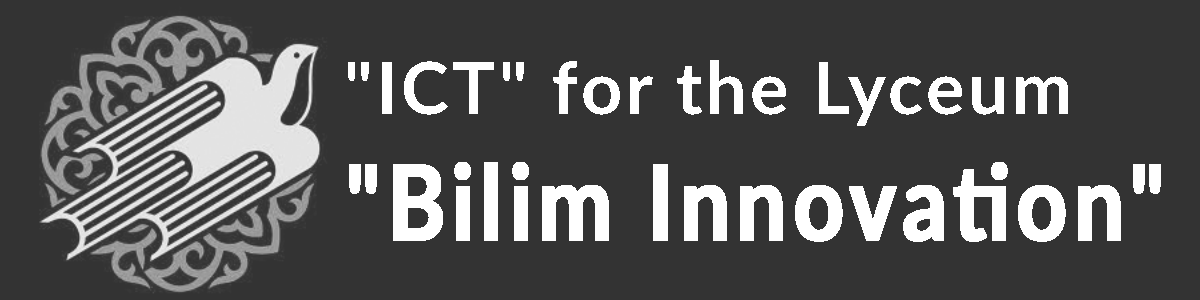
<style>
.page{position:relative;width:1200px;height:300px;background:#333333}
.page>*{position:absolute;margin:0}
.t1{font:72px "Lato-Bold";letter-spacing:0.05em;color:#ffffff}
.t2{font:104px "Lato-Bold";letter-spacing:0.05em;color:#ffffff;font-weight:bold;scale:0.85 1}
</style>
<div class="page">
<p class="t1" style="left:348px;top:60px;width:813px;height:182px">"ICT" for the Lyceum <br><span class="t2">"Bilim Innovation"</span></p>
</div>
